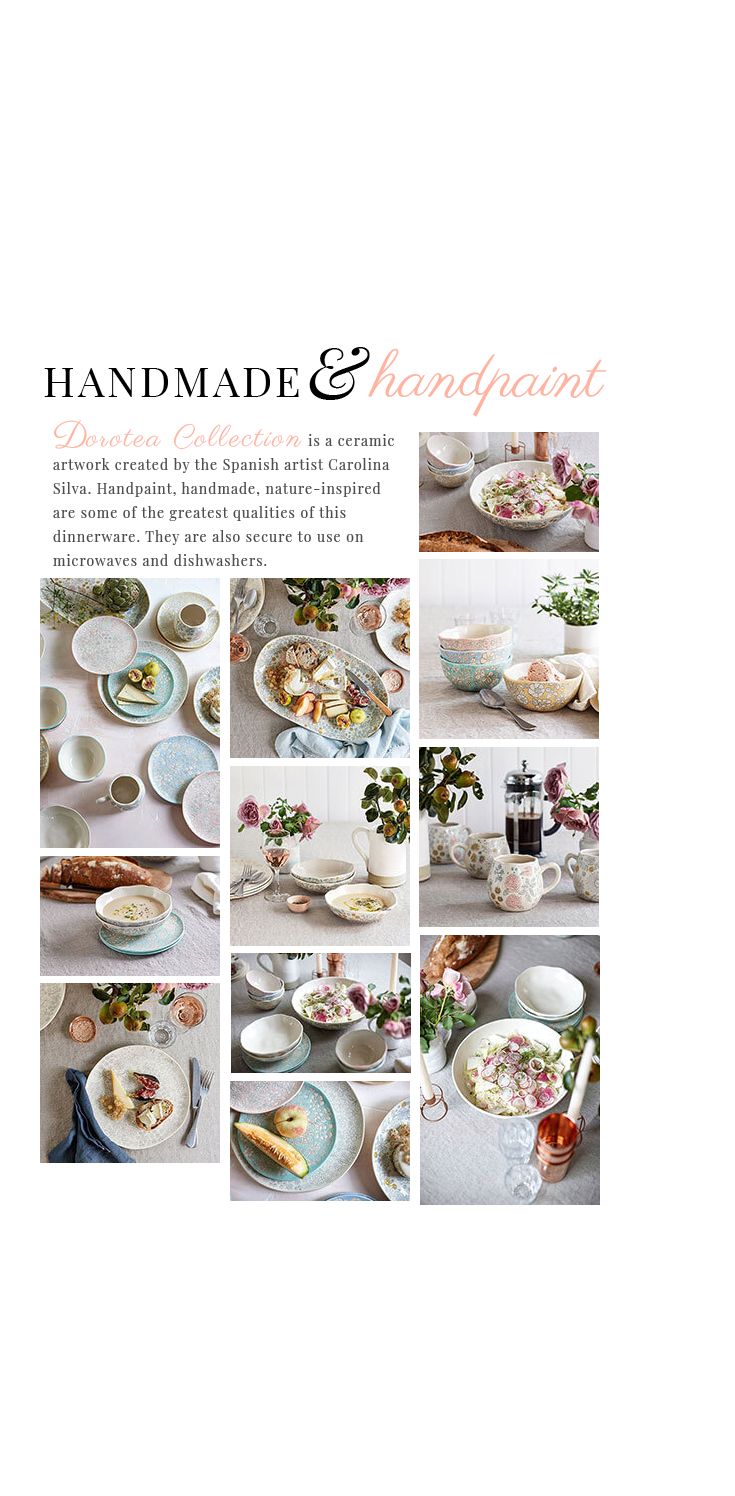
<style>
.page{position:relative;width:735px;height:1496px;background:#ffffff}
.page>*{position:absolute;margin:0}
.t1{font:72px "PlayfairDisplay-Italic";color:#000000}
.t2{font:64px "Parisienne-Regular";color:#ffb3a1}
.t3{font:42px "PlayfairDisplay-Regular";letter-spacing:0.075em;color:#000000}
.t4{font:14px/24px "PlayfairDisplay-Regular";letter-spacing:0.075em;color:#4c4c4c}
.t5{font:36px/24px "Parisienne-Regular";letter-spacing:-0.045em;color:#ffb3a1}
.t6{font:30px/24px "Parisienne-Regular";letter-spacing:0.075em;color:#ffb3a1}
</style>
<div class="page">
<p class="t1" style="left:309px;top:347px;width:61px;height:53px">&amp;</p>
<p class="t2" style="left:368px;top:348px;width:239px;height:69px">handpaint</p>
<p class="t3" style="left:44px;top:368px;width:255px;height:29px">HANDMADE</p>
<p class="t4" style="left:53px;top:420px;width:341px;height:146px"><span class="t5">D</span><span class="t6">orotea Collection </span>is a ceramic artwork created by the Spanish artist Carolina Silva. Handpaint, handmade, nature-inspired are some of the greatest qualities of this <br>dinnerware. They are also secure to use on <br>microwaves and dishwashers.</p>
</div>
